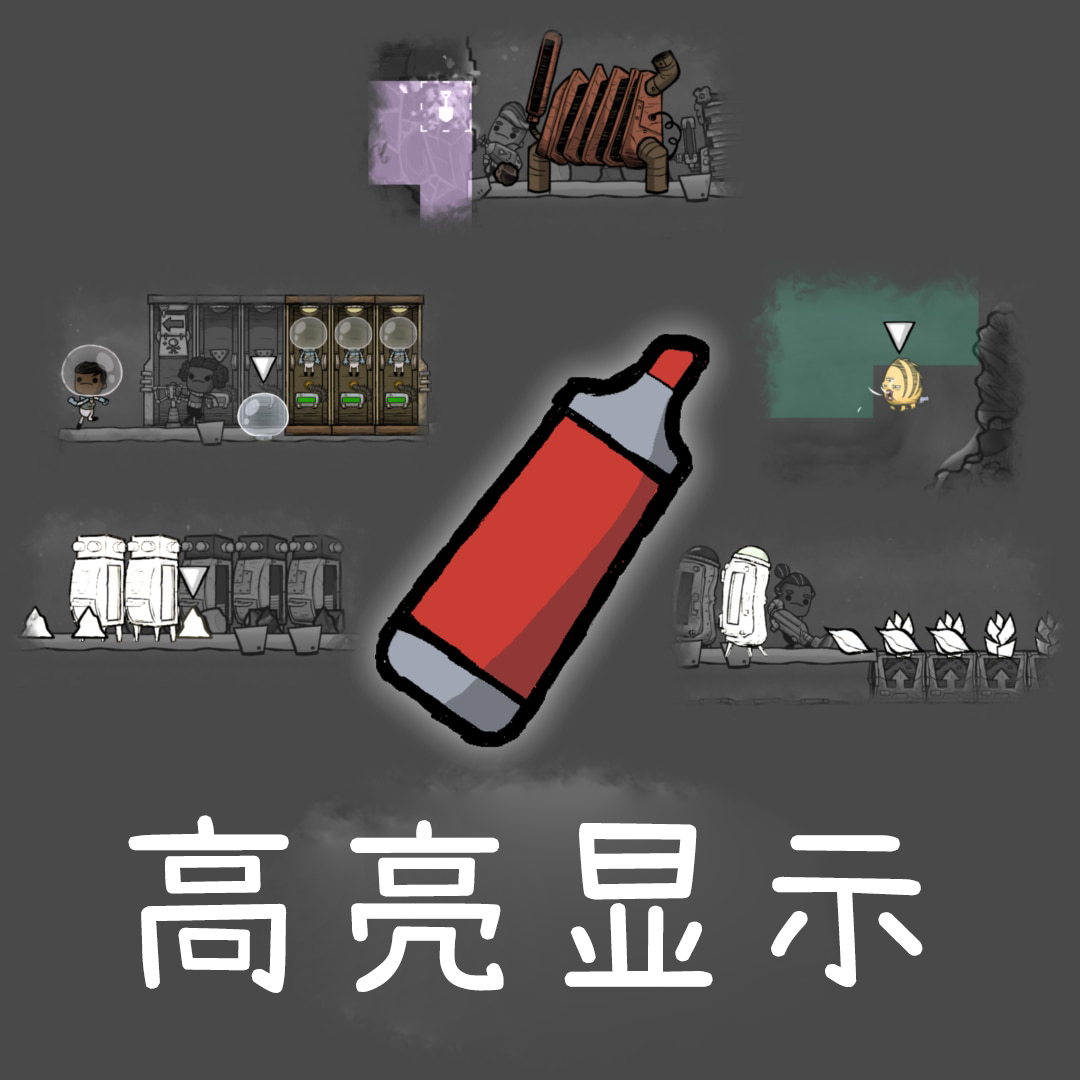
<style>
.page{position:relative;width:1080px;height:1080px;background:#494949}
.page>*{position:absolute;margin:0}
.t1{font:192.9px "XiaolaiMonoSC";letter-spacing:0.1em;color:#ffffff;text-transform:uppercase}
</style>
<div class="page">
<p class="t1" style="left:128px;top:815px;width:795px;height:178px">高亮显示</p>
</div>
